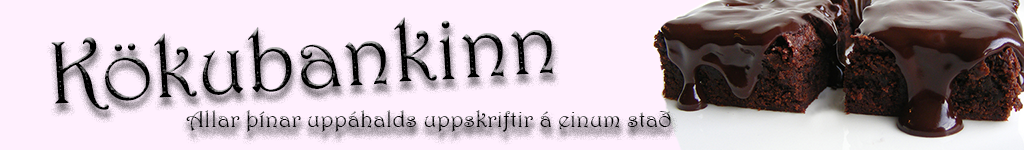
<style>
.page{position:relative;width:1024px;height:150px;background:#fff0fe}
.page>*{position:absolute;margin:0}
.t1{font:90px "Harrington";color:#000000}
.t2{font:24px "Harrington"}
</style>
<div class="page">
<p class="t1" style="left:51px;top:17px;width:502px;height:93px;rotate:-4deg">Kökubankinn</p>
<p class="t2" style="left:186px;top:110px;width:485px;height:22px">Allar þínar uppáhalds uppskriftir á einum stað</p>
</div>
